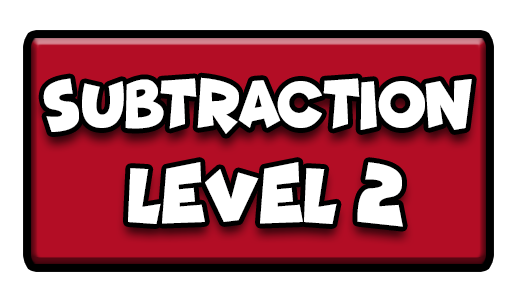
<style>
.page{position:relative;width:517px;height:301px;background:#ffffff}
.page>*{position:absolute;margin:0}
.t1{font:68.8px "Funhouse";color:#ffffff;scale:0.85 1}
.t2{font:77.7px "Funhouse";color:#ffffff;scale:0.95 1}
</style>
<div class="page">
<p class="t1" style="left:43px;top:77px;width:429px;height:57px">SUBTRACTION</p>
<p class="t2" style="left:128px;top:162px;width:275px;height:65px">LEVEL 2</p>
</div>
